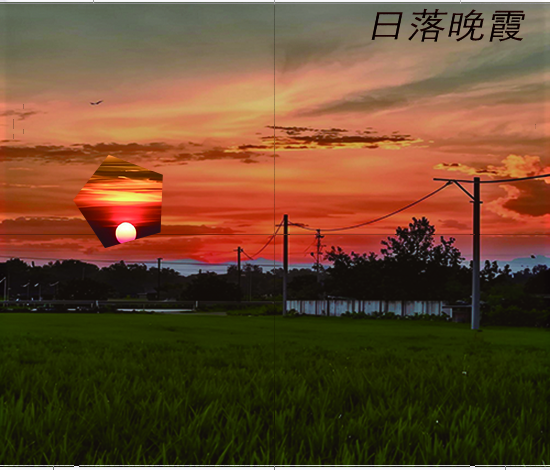
<style>
.page{position:relative;width:550px;height:470px}
.page>*{position:absolute;margin:0}
.t1{font:35.1px "DengXian";letter-spacing:0.002em;color:#050707;font-style:italic;scale:1.14 1}
</style>
<div class="page">
<p class="t1" style="left:371px;top:8px;width:154px;height:34px">日落晚霞</p>
</div>
